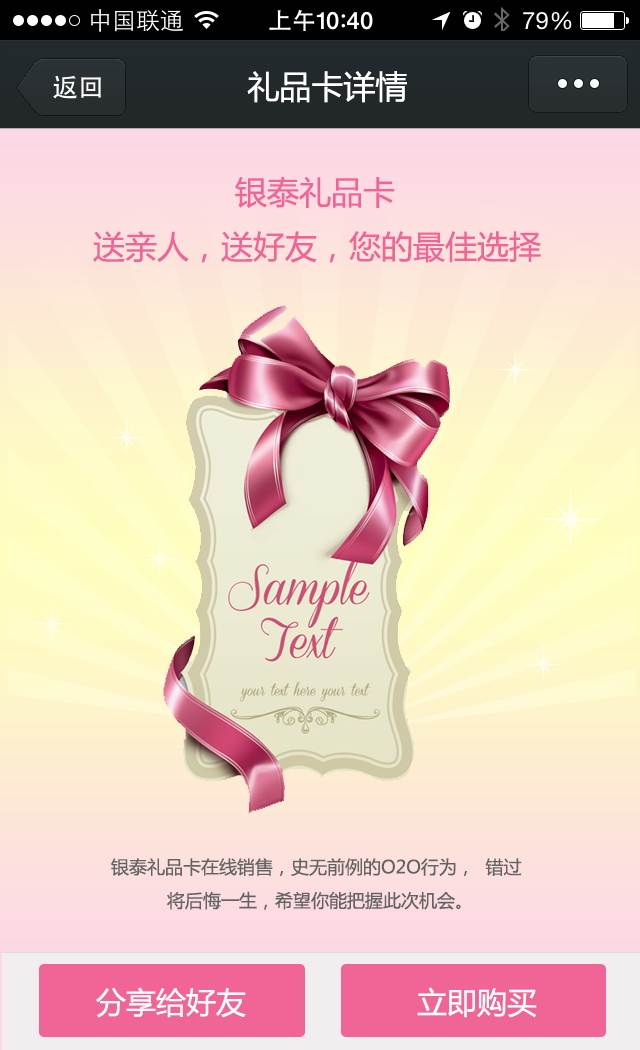
<style>
.page{position:relative;width:640px;height:1050px}
.page>*{position:absolute;margin:0}
.t1{font:32px "MicrosoftYaHei";color:#ffffff}
.t2{font:32px "MicrosoftYaHei";color:#f16498}
.t3{font:18px "MicrosoftYaHei";color:#636363}
.t4{font:30px "MicrosoftYaHei";color:#ffffff}
</style>
<div class="page">
<p class="t1" style="left:247px;top:71px;width:160px;height:32px">礼品卡详情</p>
<p class="t2" style="left:235px;top:176px;width:160px;height:32px">银泰礼品卡</p>
<p class="t2" style="left:93px;top:231px;width:448px;height:32px">送亲人，送好友，您的最佳选择</p>
<p class="t3" style="left:111px;top:858px;width:411px;height:18px">银泰礼品卡在线销售，史无前例的O2O行为，  错过</p>
<p class="t3" style="left:167px;top:891px;width:294px;height:19px">将后悔一生，希望你能把握此次机会。</p>
<p class="t4" style="left:96px;top:987px;width:150px;height:31px">分享给好友</p>
<p class="t4" style="left:417px;top:987px;width:120px;height:31px">立即购买</p>
</div>
